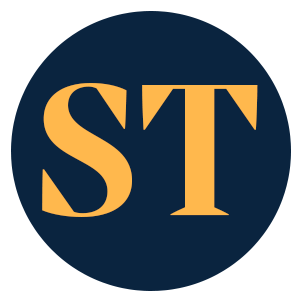
<style>
.page{position:relative;width:300px;height:300px;background:#0a243f}
.page>*{position:absolute;margin:0}
.t1{font:201.1px "FONTSPRINGDEMO-MixtaEssSharpBoldRegular";color:#ffb84d}
</style>
<div class="page">
<p class="t1" style="left:42px;top:83px;width:216px;height:134px">ST</p>
</div>
